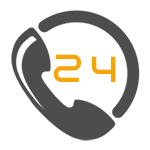
<style>
.page{position:relative;width:150px;height:150px;background:#ffffff}
.page>*{position:absolute;margin:0}
.t1{font:45.1px "01Digitall";letter-spacing:0.16em;color:#f5a50c}
</style>
<div class="page">
<p class="t1" style="left:53px;top:54px;width:63px;height:29px">24</p>
</div>
